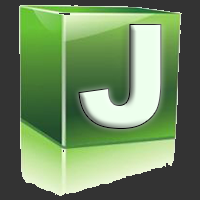
<style>
.page{position:relative;width:200px;height:200px;background:#333333}
.page>*{position:absolute;margin:0}
.t1{font:144.2px "Arial-Black";color:#edffed}
</style>
<div class="page">
<p class="t1" style="left:78px;top:24px;width:84px;height:105px">J</p>
</div>
